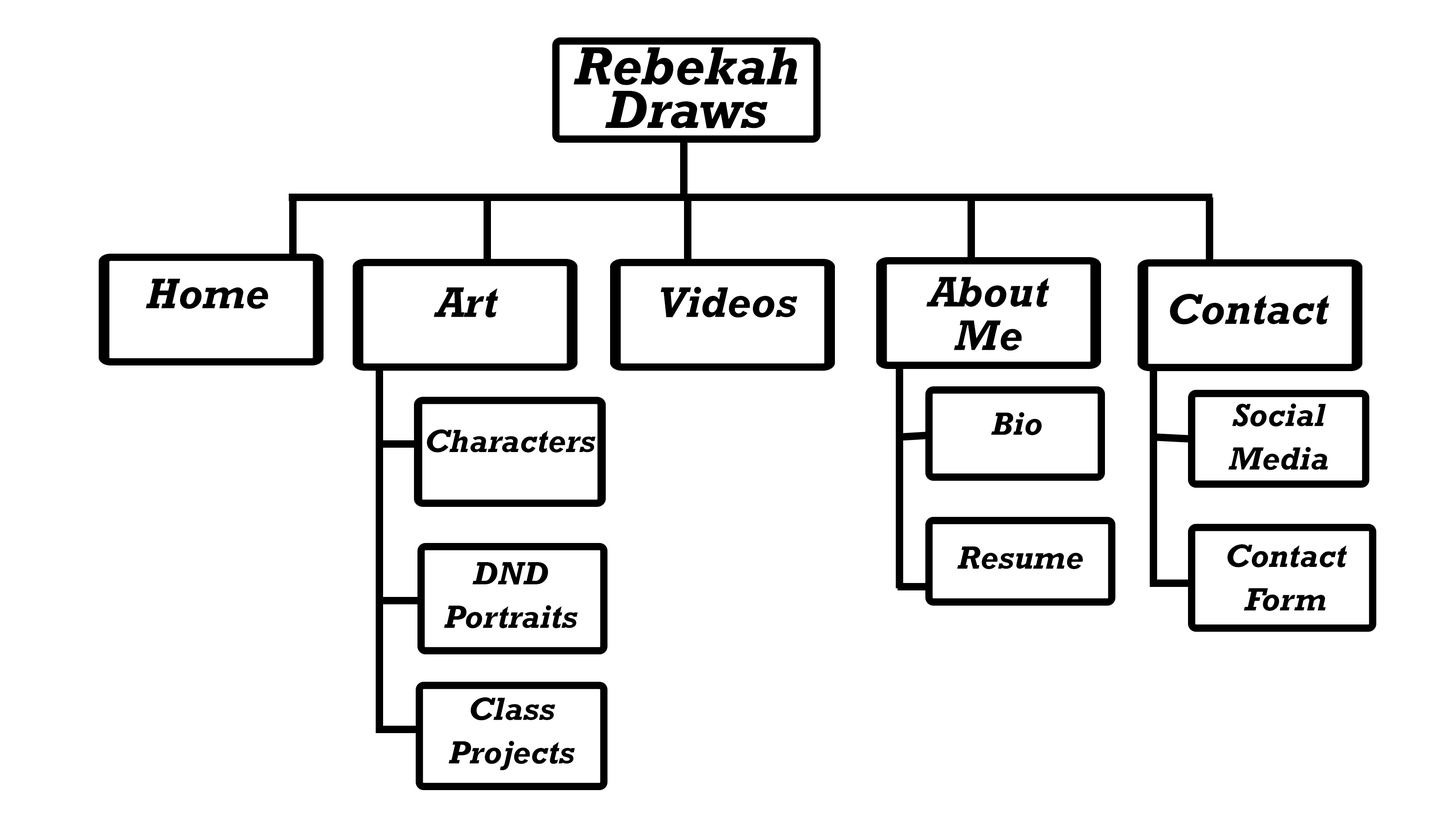
<style>
.page{position:relative;width:1435px;height:831px;background:#ffffff}
.page>*{position:absolute;margin:0}
.t1{font:54.4px "Rockwell-BoldItalic";color:#000000}
.t2{font:43.5px "Rockwell-BoldItalic";color:#000000}
.t3{font:43.5px/43.5px "Rockwell-BoldItalic";color:#000000}
.t4{font:32.6px "Rockwell-BoldItalic";color:#000000}
.t5{font:32.6px/43.5px "Rockwell-BoldItalic";color:#000000}
</style>
<div class="page">
<p class="t1" style="left:574px;top:47px;width:224px;height:81px">Rebekah Draws</p>
<p class="t2" style="left:146px;top:278px;width:122px;height:31px">Home</p>
<p class="t3" style="left:926px;top:277px;width:124px;height:74px;text-align:center">About <br>Me</p>
<p class="t2" style="left:434px;top:287px;width:64px;height:31px">Art</p>
<p class="t2" style="left:661px;top:287px;width:137px;height:31px">Videos</p>
<p class="t2" style="left:1170px;top:294px;width:160px;height:30px">Contact</p>
<p class="t4" style="left:991px;top:412px;width:51px;height:23px">Bio</p>
<p class="t5" style="left:1228px;top:403px;width:100px;height:67px;text-align:center">Social Media</p>
<p class="t4" style="left:427px;top:429px;width:169px;height:23px">Characters</p>
<p class="t5" style="left:1227px;top:544px;width:120px;height:67px;text-align:center">Contact Form</p>
<p class="t4" style="left:957px;top:546px;width:126px;height:23px">Resume</p>
<p class="t5" style="left:444px;top:562px;width:134px;height:66px;text-align:center">DND <br>Portraits</p>
<p class="t5" style="left:448px;top:697px;width:127px;height:73px;text-align:center">Class<br>Projects</p>
</div>
